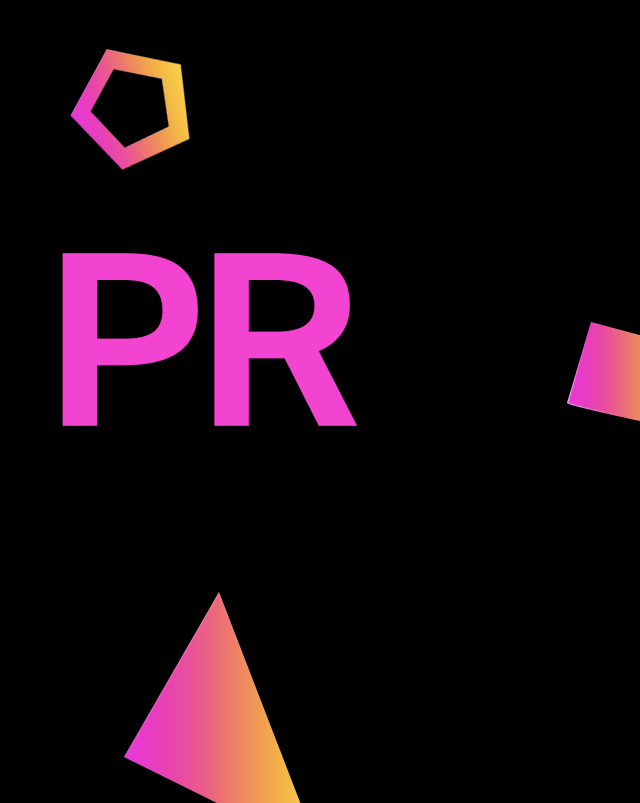
<style>
.page{position:relative;width:640px;height:803px;background:#000000}
.page>*{position:absolute;margin:0}
.t1{font:237.5px "SuisseIntl-SemiBold";color:#f243d1}
</style>
<div class="page">
<p class="t1" style="left:62px;top:253px;width:295px;height:173px">PR</p>
</div>
